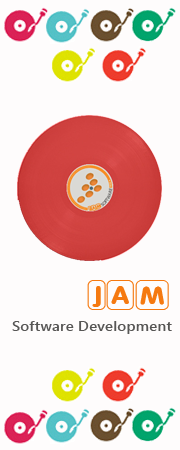
<style>
.page{position:relative;width:180px;height:450px;background:#fefcfc}
.page>*{position:absolute;margin:0}
.t1{font:30px "a_FuturaRoundTtlCmDFr";color:#f57910;scale:1.1 1}
.t2{font:14px "SegoeUI-SemiBold";color:#575655;scale:1.1 1}
</style>
<div class="page">
<p class="t1" style="left:87px;top:280px;width:82px;height:30px">JAM</p>
<p class="t2" style="left:12px;top:321px;width:160px;height:13px">Software Development</p>
</div>
